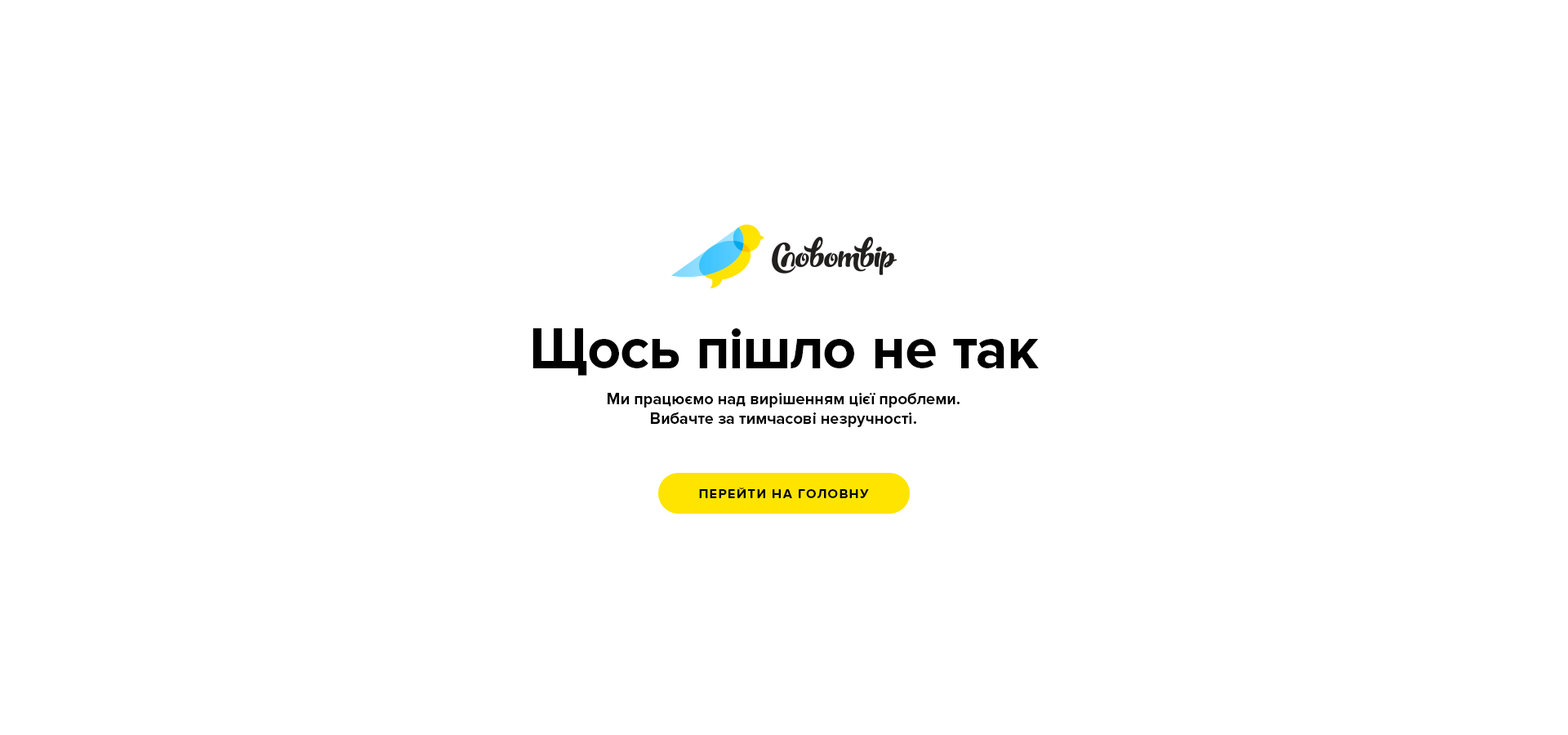
<style>
.page{position:relative;width:1568px;height:735px;background:#ffffff}
.page>*{position:absolute;margin:0}
.t1{font:58.8px "ProximaNova-Bold";color:#000000}
.t2{font:16.3px "ProximaNova-Bold";color:#000000}
.t3{font:13.1px "ProximaNova-Bold";letter-spacing:0.1em;color:#000000;text-transform:uppercase}
</style>
<div class="page">
<p class="t1" style="left:532px;top:328px;width:507px;height:48px">Щось пішло не так</p>
<p class="t2" style="left:608px;top:393px;width:352px;height:34px;text-align:center">Ми працюємо над вирішенням цієї проблеми.<br>Вибачте за тимчасові незручності.</p>
<p class="t3" style="left:699px;top:488px;width:170px;height:10px">Перейти на головну</p>
</div>
